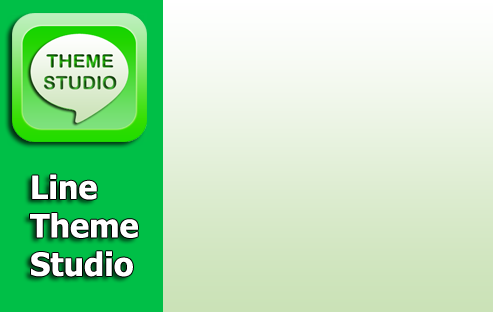
<style>
.page{position:relative;width:493px;height:312px}
.page>*{position:absolute;margin:0}
.t1{font:32px "Tahoma-Bold";color:#ffffff}
</style>
<div class="page">
<p class="t1" style="left:30px;top:174px;width:108px;height:103px">Line<br>Theme<br>Studio</p>
</div>
